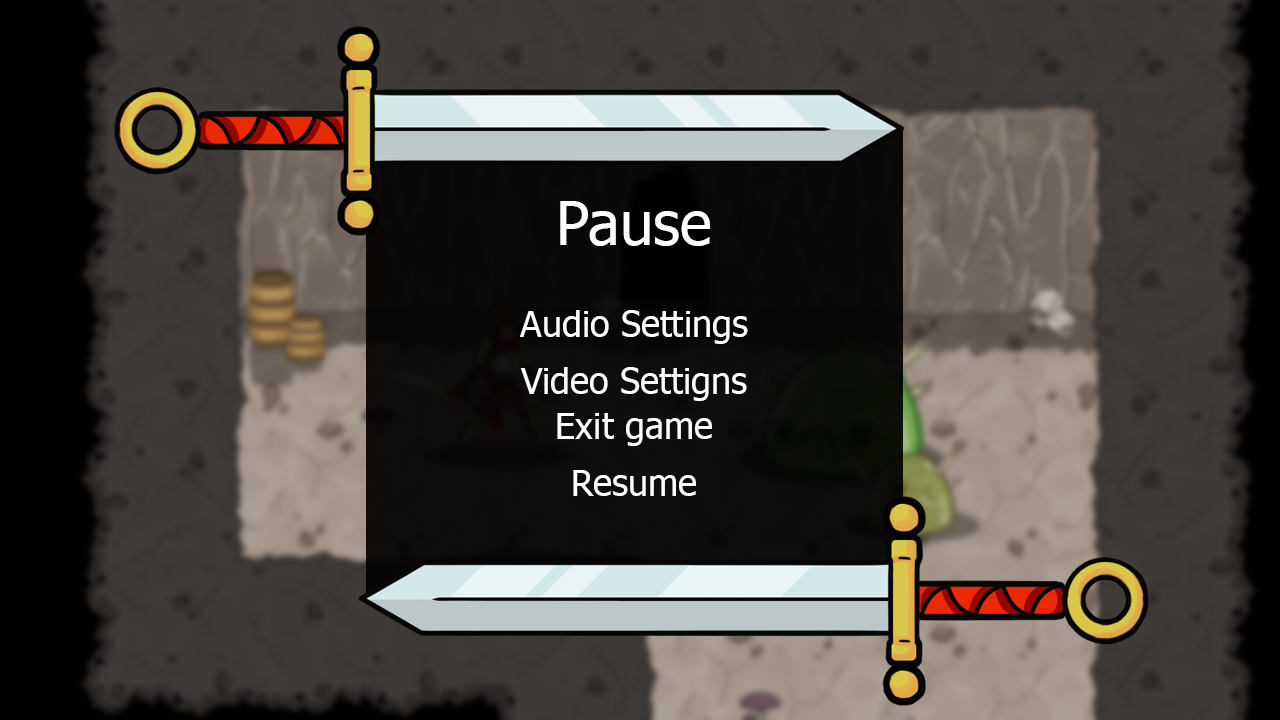
<style>
.page{position:relative;width:1280px;height:720px}
.page>*{position:absolute;margin:0}
.t1{font:60px "Tahoma";color:#ffffff}
.t2{font:36px "Tahoma";color:#ffffff}
</style>
<div class="page">
<p class="t1" style="left:560px;top:201px;width:150px;height:45px">Pause</p>
<p class="t2" style="left:520px;top:310px;width:228px;height:34px">Audio Settings</p>
<p class="t2" style="left:520px;top:367px;width:227px;height:34px">Video Settigns</p>
<p class="t2" style="left:557px;top:413px;width:155px;height:33px">Exit game</p>
<p class="t2" style="left:573px;top:470px;width:123px;height:26px">Resume</p>
</div>
